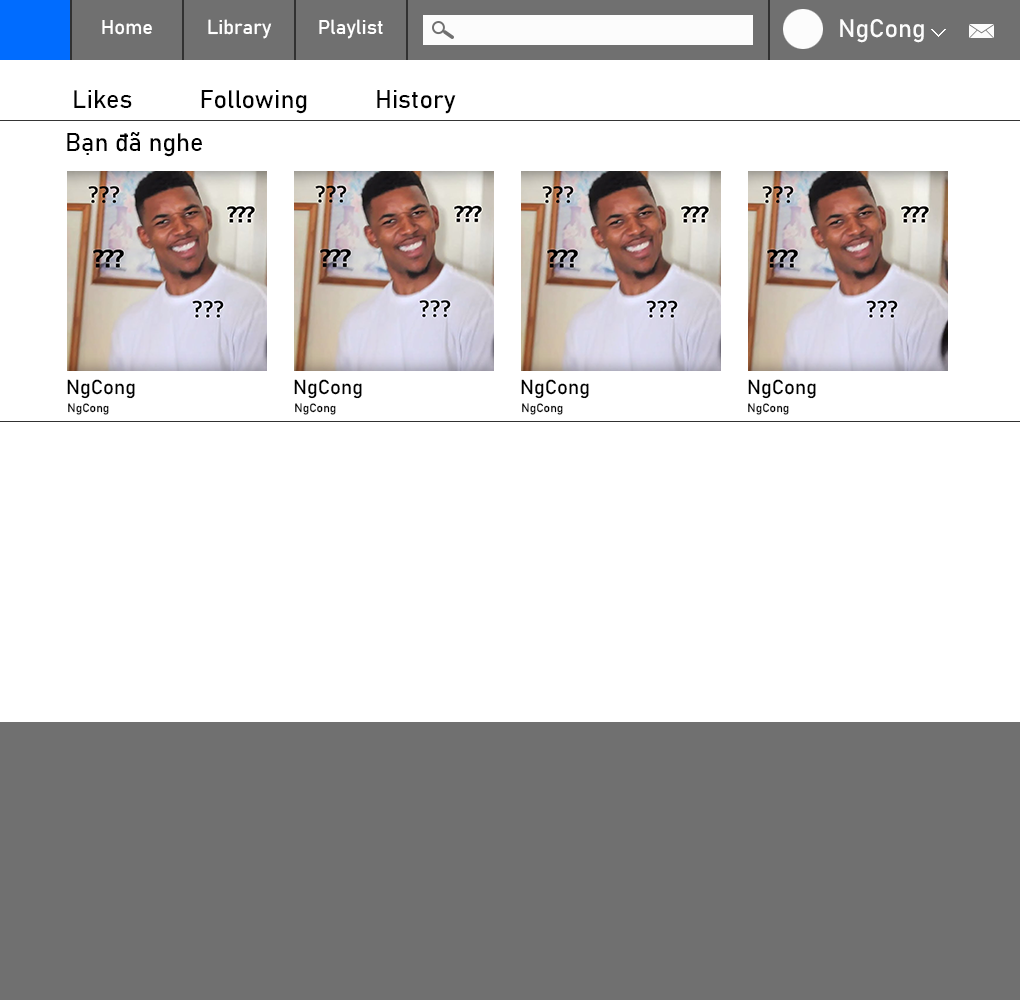
<style>
.page{position:relative;width:1020px;height:1000px;background:#ffffff}
.page>*{position:absolute;margin:0}
.t1{font:20px "Bahnschrift";color:#ffffff}
.t2{font:25px "Bahnschrift";color:#fcfcfc}
.t3{font:25px "Bahnschrift";color:#000000}
.t4{font:20px "Bahnschrift";color:#000000}
.t5{font:12px "Bahnschrift";color:#000000}
</style>
<div class="page">
<p class="t1" style="left:102px;top:20px;width:50px;height:15px">Home</p>
<p class="t1" style="left:208px;top:19px;width:64px;height:20px">Library</p>
<p class="t1" style="left:319px;top:19px;width:64px;height:20px">Playlist</p>
<p class="t2" style="left:840px;top:19px;width:84px;height:24px">NgCong</p>
<p class="t3" style="left:74px;top:90px;width:382px;height:24px">Likes          Following          History</p>
<p class="t3" style="left:67px;top:132px;width:135px;height:25px">Bạn đã nghe</p>
<p class="t4" style="left:67px;top:379px;width:68px;height:20px">NgCong</p>
<p class="t4" style="left:67px;top:379px;width:68px;height:20px">NgCong</p>
<p class="t4" style="left:294px;top:379px;width:68px;height:20px">NgCong</p>
<p class="t4" style="left:294px;top:379px;width:68px;height:20px">NgCong</p>
<p class="t4" style="left:521px;top:379px;width:68px;height:20px">NgCong</p>
<p class="t4" style="left:521px;top:379px;width:68px;height:20px">NgCong</p>
<p class="t4" style="left:748px;top:379px;width:68px;height:20px">NgCong</p>
<p class="t4" style="left:748px;top:379px;width:68px;height:20px">NgCong</p>
<p class="t5" style="left:68px;top:403px;width:41px;height:12px">NgCong</p>
<p class="t5" style="left:68px;top:403px;width:41px;height:12px">NgCong</p>
<p class="t5" style="left:295px;top:403px;width:41px;height:12px">NgCong</p>
<p class="t5" style="left:295px;top:403px;width:41px;height:12px">NgCong</p>
<p class="t5" style="left:522px;top:403px;width:41px;height:12px">NgCong</p>
<p class="t5" style="left:522px;top:403px;width:41px;height:12px">NgCong</p>
<p class="t5" style="left:748px;top:403px;width:41px;height:12px">NgCong</p>
<p class="t5" style="left:748px;top:403px;width:41px;height:12px">NgCong</p>
</div>
